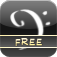
<style>
.page{position:relative;width:57px;height:57px}
.page>*{position:absolute;margin:0}
.t1{font:13px "RedStateBlueStateBB";letter-spacing:0.075em}
</style>
<div class="page">
<p class="t1" style="left:15px;top:38px;width:27px;height:8px">FREE</p>
</div>
